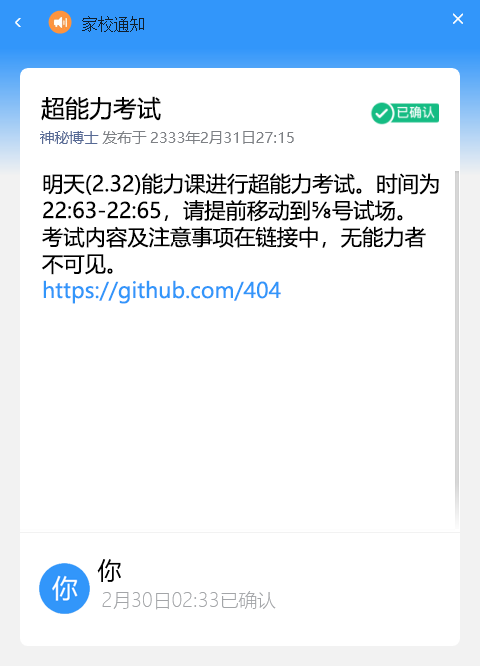
<style>
.page{position:relative;width:480px;height:666px;background:#ffffff}
.page>*{position:absolute;margin:0}
.t1{font:24px "MicrosoftYaHei";color:#000000}
.t2{font:14.7px "MicrosoftYaHei";color:#7e8185}
.t3{font:14.7px "MicrosoftYaHei";color:#576a95}
.t4{font:21.3px/26.7px "MicrosoftYaHei";color:#000000}
.t5{font:21.3px/26.7px "MicrosoftYaHei";color:#3296fa}
.t6{font:18.7px "MicrosoftYaHeiLight";color:#a3a5a8}
</style>
<div class="page">
<p class="t1" style="left:41px;top:96px;width:120px;height:25px">超能力考试</p>
<p class="t2" style="left:40px;top:131px;width:254px;height:13px"><span class="t3">神秘博士</span> 发布于 2333年2月31日27:15</p>
<p class="t4" style="left:42px;top:173px;width:397px;height:131px">明天(2.32)能力课进行超能力考试。时间为<br>22:63-22:65，请提前移动到⅝号试场。<br>考试内容及注意事项在链接中，无能力者<br>不可见。<br><span class="t5">https://github.com/404</span></p>
<p class="t1" style="left:97px;top:559px;width:24px;height:23px">你</p>
<p class="t6" style="left:102px;top:591px;width:174px;height:19px">2月30日02:33已确认</p>
</div>
